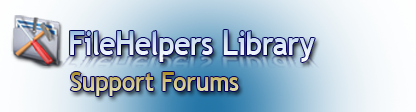
<style>
.page{position:relative;width:416px;height:112px}
.page>*{position:absolute;margin:0}
.t1{font:31.7px "TrebuchetMS-Bold";letter-spacing:-0.01em;scale:0.9 1}
.t2{font:33.3px "TrebuchetMS-Bold";letter-spacing:-0.01em;scale:0.9 1}
.t3{font:34.9px "TrebuchetMS-Bold";letter-spacing:-0.01em;scale:0.9 1}
.t4{font:26.3px "TrebuchetMS-Bold";letter-spacing:-0.01em;scale:0.9 1}
</style>
<div class="page">
<p class="t1" style="left:70px;top:30px;width:245px;height:32px"><span class="t2">F</span>ile<span class="t2">H</span>elpers <span class="t3">L</span><span class="t2">i</span>brary</p>
<p class="t4" style="left:70px;top:72px;width:169px;height:24px">Support Forums</p>
</div>
